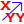
<style>
.page{position:relative;width:24px;height:24px;background:#ffffff}
.page>*{position:absolute;margin:0}
.t1{font:14px "CopperplateGothic-Bold";color:#ff0000}
</style>
<div class="page">
<p class="t1" style="left:0px;top:1px;width:11px;height:9px">X</p>
<p class="t1" style="left:5px;top:13px;width:21px;height:9px">YY</p>
</div>
